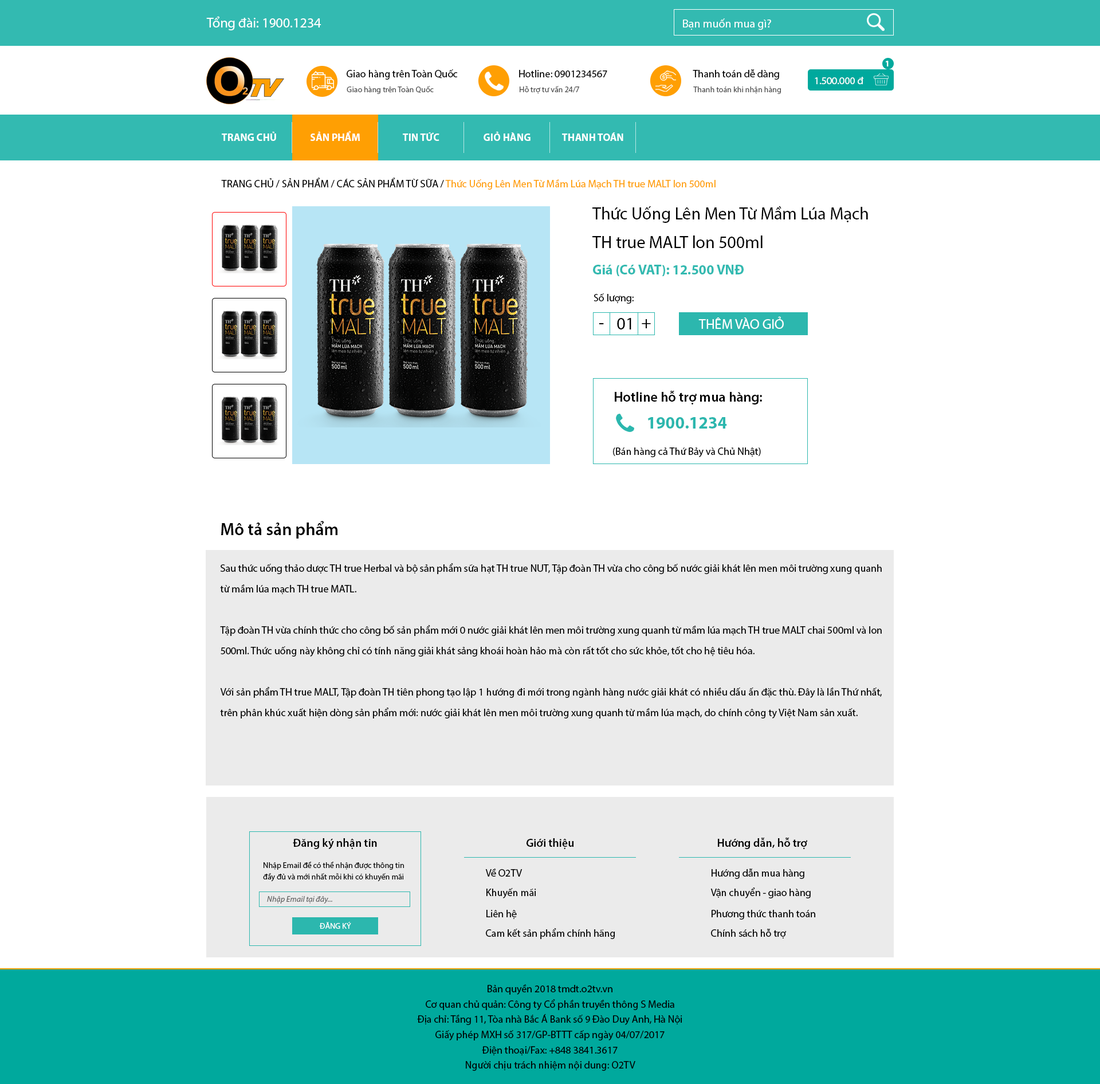
<style>
.page{position:relative;width:1100px;height:1084px;background:#ffffff}
.page>*{position:absolute;margin:0}
.t1{font:13.8px "MyriadPro-Regular";color:#ffffff}
.t2{font:11.5px "MyriadPro-Regular";color:#ffffff}
.t3{font:8px "MyriadPro-Bold";color:#ffffff}
.t4{font:10.3px "MyriadPro-Regular";color:#000000}
.t5{font:10.3px "MyriadPro-Regular";color:#ffffff}
.t6{font:8px "MyriadPro-Regular";color:#4f4f4f}
.t7{font:10.3px "MyriadPro-Bold";color:#ffffff}
.t8{font:10.3px "MyriadPro-Regular";color:#ff9f03}
.t9{font:17.2px/28.6px "MyriadPro-Regular";color:#000000}
.t10{font:13.8px "MyriadPro-Bold";color:#33bab1}
.t11{font:10.3px "MyriadPro-Regular";color:#010101}
.t12{font:17.2px "MyriadPro-Regular";color:#000000}
.t13{font:13.8px "MyriadPro-Semibold";color:#010101}
.t14{font:17.2px "MyriadPro-Bold";color:#2cb7ae}
.t15{font:17.2px "MyriadPro-Semibold";color:#000000}
.t16{font:10.3px/20.6px "MyriadPro-Regular";color:#000000}
.t17{font:11.5px "MyriadPro-Semibold";color:#000000}
.t18{font:8px/11.5px "MyriadPro-Regular";color:#000000}
.t19{font:8px "MyriadPro-It";color:#636363}
.t20{font:8px "MyriadPro-Regular";color:#ffffff}
.t21{font:10.3px/15.3px "MyriadPro-Regular";color:#000000}
.t22{font:10.3px/20.1px "MyriadPro-Regular";color:#000000}
</style>
<div class="page">
<p class="t1" style="left:206px;top:16px;width:115px;height:14px">Tổng đài: 1900.1234</p>
<p class="t2" style="left:683px;top:18px;width:88px;height:12px">Bạn muốn mua gì?</p>
<p class="t3" style="left:886px;top:61px;width:3px;height:5px">1</p>
<p class="t4" style="left:347px;top:69px;width:111px;height:11px">Giao hàng trên Toàn Quốc</p>
<p class="t4" style="left:519px;top:70px;width:88px;height:7px">Hotline: 0901234567</p>
<p class="t4" style="left:693px;top:69px;width:86px;height:11px">Thanh toán dễ dàng</p>
<p class="t5" style="left:815px;top:77px;width:49px;height:7px">1.500.000 đ</p>
<p class="t6" style="left:347px;top:86px;width:87px;height:8px">Giao hàng trên Toàn Quốc</p>
<p class="t6" style="left:520px;top:86px;width:59px;height:8px">Hỗ trợ tư vấn 24/7</p>
<p class="t6" style="left:693px;top:87px;width:88px;height:7px">Thanh toán khi nhận hàng</p>
<p class="t7" style="left:222px;top:131px;width:54px;height:10px">TRANG CHỦ</p>
<p class="t7" style="left:311px;top:131px;width:49px;height:10px">SẢN PHẨM</p>
<p class="t7" style="left:403px;top:132px;width:36px;height:9px">TIN TỨC</p>
<p class="t7" style="left:484px;top:131px;width:47px;height:10px">GIỎ HÀNG</p>
<p class="t7" style="left:562px;top:132px;width:61px;height:9px">THANH TOÁN</p>
<p class="t8" style="left:221px;top:178px;width:495px;height:12px"><span class="t4">TRANG CHỦ / SẢN PHẨM / CÁC SẢN PHẨM TỪ SỮA / </span>Thức Uống Lên Men Từ Mầm Lúa Mạch TH true MALT lon 500ml</p>
<p class="t9" style="left:592px;top:206px;width:276px;height:42px">Thức Uống Lên Men Từ Mầm Lúa Mạch <br>TH true MALT lon 500ml</p>
<p class="t10" style="left:593px;top:265px;width:151px;height:11px">Giá (Có VAT): 12.500 VNĐ</p>
<p class="t11" style="left:594px;top:293px;width:40px;height:11px">Số lượng:</p>
<p class="t12" style="left:617px;top:318px;width:14px;height:11px">01</p>
<p class="t1" style="left:698px;top:316px;width:86px;height:13px">THÊM VÀO GIỎ</p>
<p class="t12" style="left:599px;top:323px;width:5px;height:1px">-</p>
<p class="t12" style="left:642px;top:319px;width:9px;height:9px">+</p>
<p class="t13" style="left:615px;top:391px;width:147px;height:13px">Hotline hỗ trợ mua hàng:</p>
<p class="t14" style="left:648px;top:417px;width:79px;height:12px">1900.1234</p>
<p class="t4" style="left:613px;top:447px;width:148px;height:10px">(Bán hàng cả Thứ Bảy và Chủ Nhật)</p>
<p class="t15" style="left:221px;top:521px;width:116px;height:18px">Mô tả sản phẩm</p>
<p class="t16" style="left:220px;top:563px;width:662px;height:155px;text-align:justify">Sau thức uống thảo dược TH true Herbal và bộ sản phẩm sữa hạt TH true NUT, Tập đoàn TH vừa cho công bố nước giải khát lên men môi trường xung quanh từ mầm lúa mạch TH true MATL.<br><br>Tập đoàn TH vừa chính thức cho công bố sản phẩm mới 0 nước giải khát lên men môi trường xung quanh từ mầm lúa mạch TH true MALT chai 500ml và lon 500ml. Thức uống này không chỉ có tính năng giải khát sảng khoái hoàn hảo mà còn rất tốt cho sức khỏe, tốt cho hệ tiêu hóa.<br><br>Với sản phẩm TH true MALT, Tập đoàn TH tiên phong tạo lập 1 hướng đi mới trong ngành hàng nước giải khát có nhiều dấu ấn đặc thù. Đây là lần Thứ nhất, trên phân khúc xuất hiện dòng sản phẩm mới: nước giải khát lên men môi trường xung quanh từ mầm lúa mạch, do chính công ty Việt Nam sản xuất.</p>
<p class="t17" style="left:293px;top:838px;width:84px;height:11px">Đăng ký nhận tin</p>
<p class="t17" style="left:527px;top:838px;width:47px;height:11px">Giới thiệu</p>
<p class="t17" style="left:718px;top:838px;width:89px;height:11px">Hướng dẫn, hỗ trợ</p>
<p class="t18" style="left:263px;top:862px;width:141px;height:20px">Nhập Email để có thể nhận được thông tin đầy đủ và mới nhất mỗi khi có khuyến mãi</p>
<p class="t4" style="left:485px;top:869px;width:38px;height:8px">Về O2TV</p>
<p class="t4" style="left:712px;top:869px;width:92px;height:10px">Hướng dẫn mua hàng</p>
<p class="t4" style="left:486px;top:888px;width:50px;height:10px">Khuyến mãi</p>
<p class="t4" style="left:710px;top:887px;width:101px;height:11px">Vận chuyển - giao hàng</p>
<p class="t19" style="left:267px;top:896px;width:65px;height:8px">Nhập Email tại đây...</p>
<p class="t4" style="left:486px;top:910px;width:31px;height:9px">Liên hệ</p>
<p class="t4" style="left:712px;top:910px;width:103px;height:10px">Phương thức thanh toán</p>
<p class="t20" style="left:319px;top:922px;width:32px;height:7px">ĐĂNG KÝ</p>
<p class="t4" style="left:486px;top:928px;width:129px;height:11px">Cam kết sản phẩm chính hãng</p>
<p class="t4" style="left:711px;top:929px;width:75px;height:10px">Chính sách hỗ trợ</p>
<p class="t21" style="left:417px;top:984px;width:265px;height:87px;text-align:center"><span class="t22">Bản quyền 2018 tmdt.o2tv.vn<br></span>Cơ quan chủ quản: Công ty Cổ phần truyền thông S Media<br>Địa chỉ: Tầng 11, Tòa nhà Bắc Á Bank số 9 Đào Duy Anh, Hà Nội<br>Giấy phép MXH số 317/GP-BTTT cấp ngày 04/07/2017<br>Điện thoại/Fax: +848 3841.3617<br>Người chịu trách nhiệm nội dung: O2TV</p>
</div>
